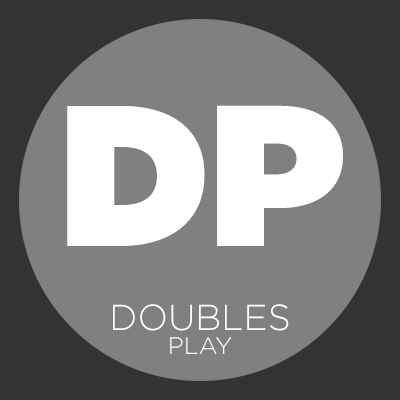
<style>
.page{position:relative;width:400px;height:400px;background:#808080}
.page>*{position:absolute;margin:0}
.t1{font:200px "Gotham-Ultra";color:#ffffff}
.t2{font:36px/24px "Gotham-Light";color:#ffffff}
.t3{font:24px/24px "Gotham-Light";color:#ffffff}
</style>
<div class="page">
<p class="t1" style="left:67px;top:105px;width:276px;height:141px">DP</p>
<p class="t2" style="left:113px;top:304px;width:176px;height:50px;text-align:center">DOUBLES<br><span class="t3">PLAY</span></p>
</div>
